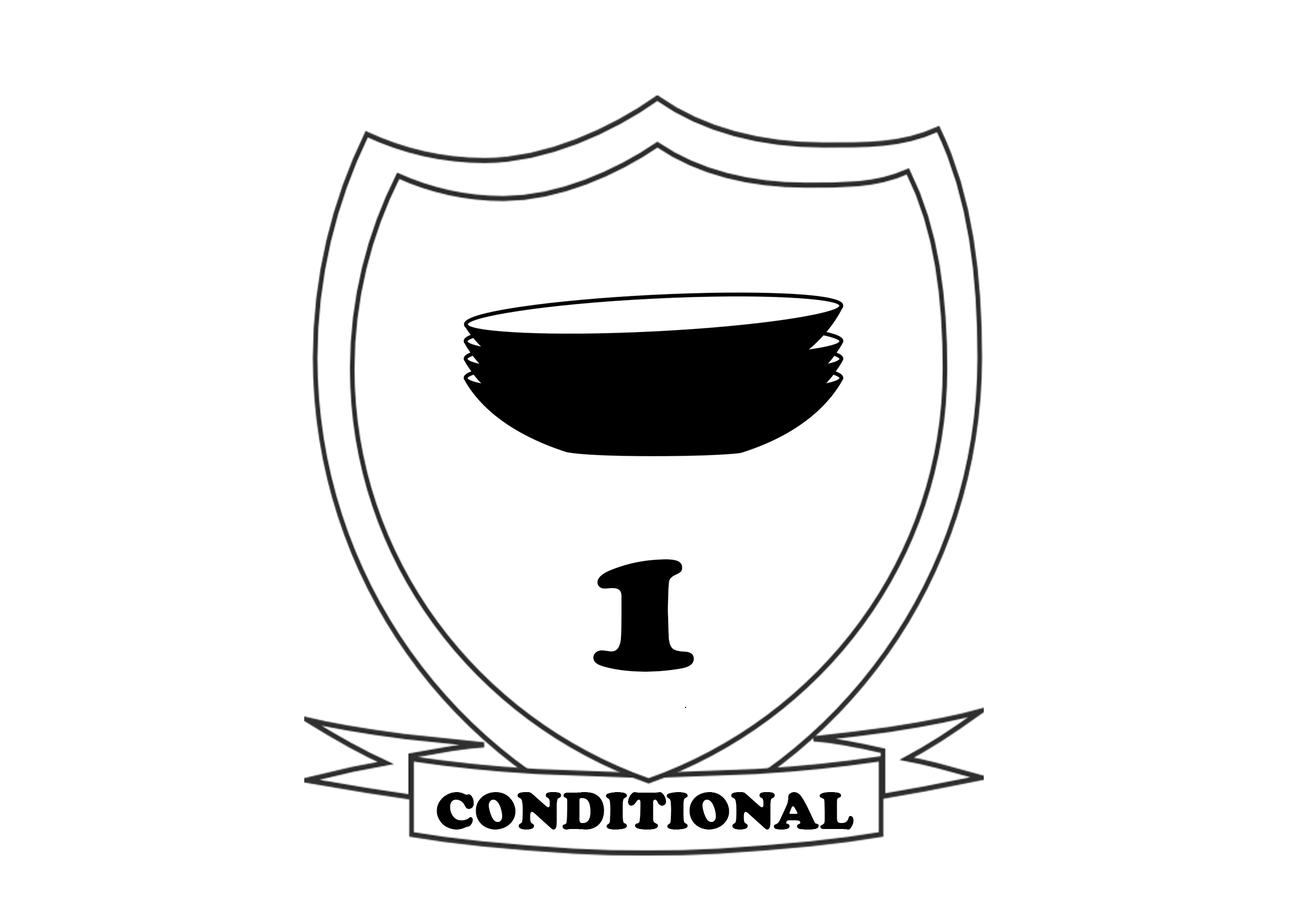
<style>
.page{position:relative;width:1307px;height:912px;background:#ffffff}
.page>*{position:absolute;margin:0}
.t1{font:195.3px "CooperBlack";color:#000000}
.t2{font:54.3px "CooperBlack";color:#000000}
</style>
<div class="page">
<p class="t1" style="left:594px;top:559px;width:100px;height:113px">1</p>
<p class="t2" style="left:437px;top:792px;width:417px;height:38px">CONDITIONAL</p>
</div>
